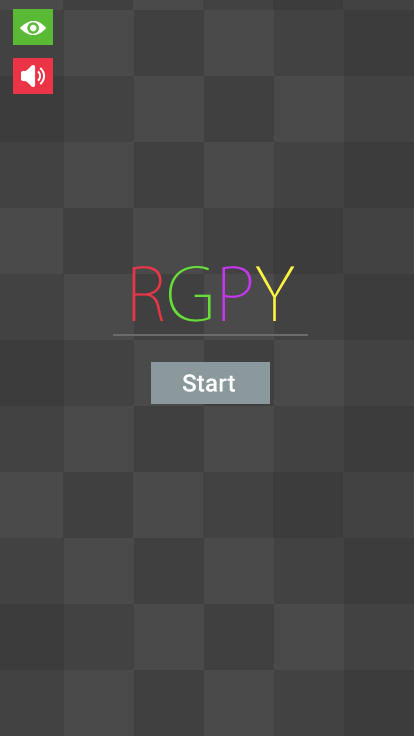
<style>
.page{position:relative;width:414px;height:736px;background:#424242}
.page>*{position:absolute;margin:0}
.t1{font:72px "KozGoPro-ExtraLight";letter-spacing:0.005em;color:#eb3546}
.t2{font:72px "KozGoPro-ExtraLight";letter-spacing:0.005em;color:#67de38}
.t3{font:72px "KozGoPro-ExtraLight";letter-spacing:0.005em;color:#c536ee}
.t4{font:72px "KozGoPro-ExtraLight";letter-spacing:0.005em;color:#fff440}
.t5{font:24px "Roboto-Medium";letter-spacing:0.005em;color:#ffffff}
</style>
<div class="page">
<p class="t1" style="left:132px;top:266px;width:163px;height:56px">R<span class="t2">G</span><span class="t3">P</span><span class="t4">Y</span></p>
<p class="t5" style="left:183px;top:374px;width:52px;height:18px">Start</p>
</div>
